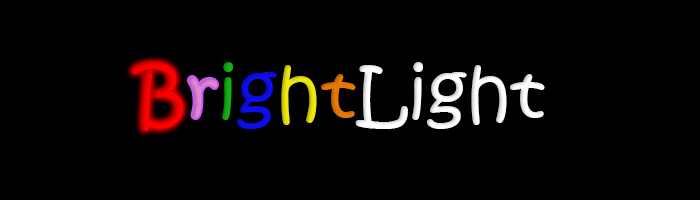
<style>
.page{position:relative;width:700px;height:200px;background:#000000}
.page>*{position:absolute;margin:0}
.t1{font:72px "KristenITC-Regular";color:#ffffff}
.t2{font:72px "KristenITC-Regular";color:#ff0000}
.t3{font:72px "KristenITC-Regular";color:#f08ee6}
.t4{font:72px "KristenITC-Regular";color:#14b214}
.t5{font:72px "KristenITC-Regular";color:#0d0def}
.t6{font:72px "KristenITC-Regular";color:#efe70d}
.t7{font:72px "KristenITC-Regular";color:#e87a04}
</style>
<div class="page">
<p class="t1" style="left:131px;top:62px;width:414px;height:69px"><span class="t2">B</span><span class="t3">r</span><span class="t4">i</span><span class="t5">g</span><span class="t6">h</span><span class="t7">t</span>Light</p>
<p class="t2" style="left:131px;top:62px;width:53px;height:69px">B</p>
</div>
